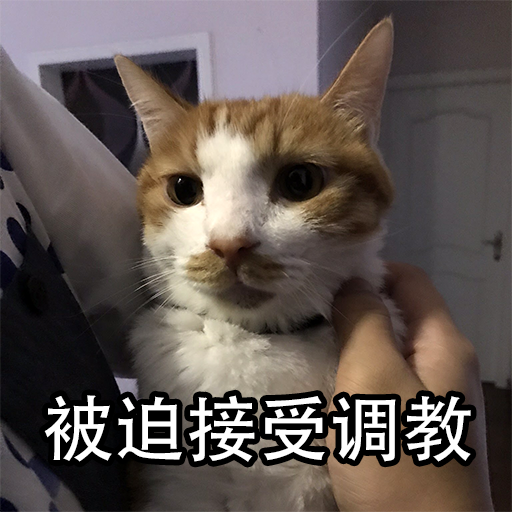
<style>
.page{position:relative;width:512px;height:512px}
.page>*{position:absolute;margin:0}
.t1{font:72px "AdobeHeitiStd-Regular";color:#ffffff}
</style>
<div class="page">
<p class="t1" style="left:44px;top:395px;width:427px;height:67px">被迫接受调教</p>
</div>
